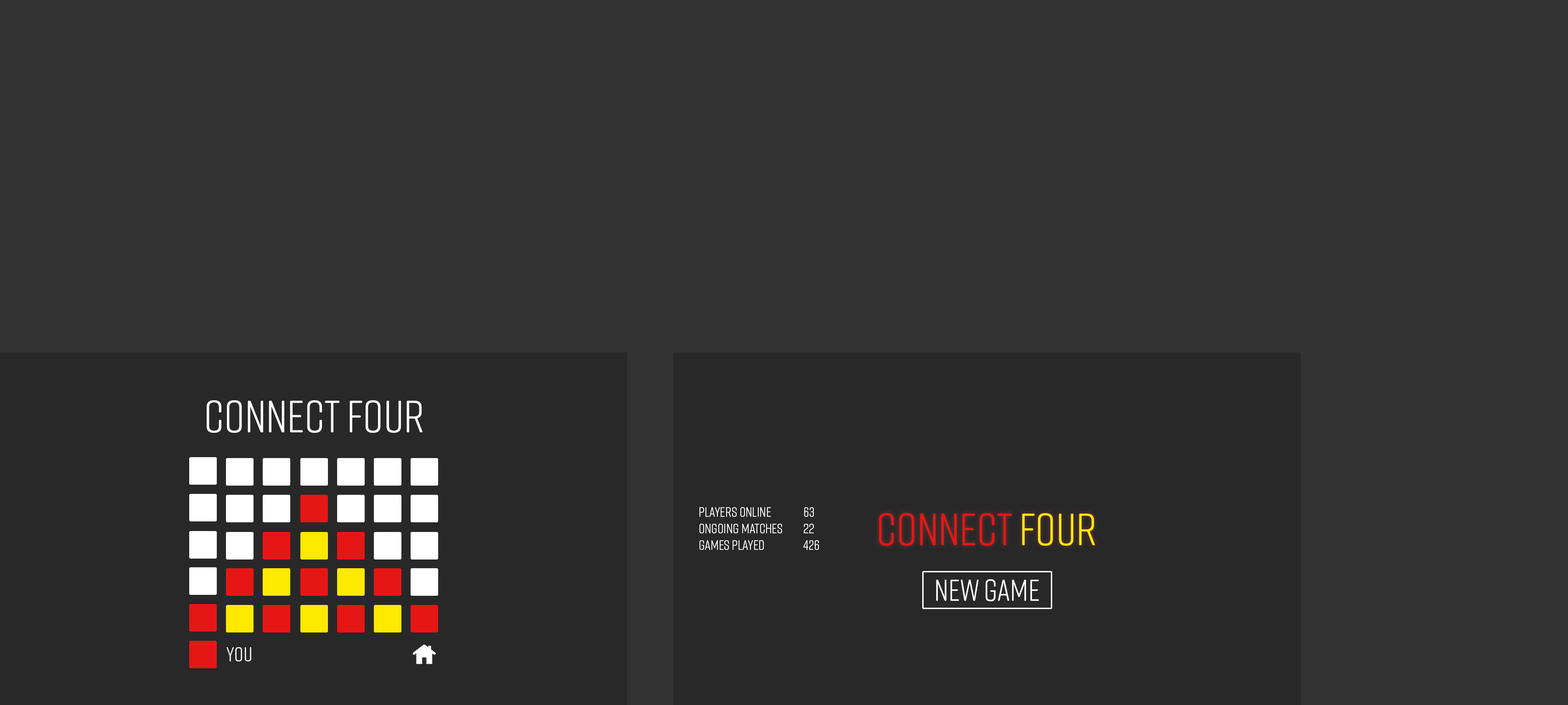
<style>
.page{position:relative;width:1568px;height:705px;background:#333333}
.page>*{position:absolute;margin:0}
.t1{font:45.5px "RiftSoft-Regular";color:#ffffff}
.t2{font:13.8px "RiftSoft-Regular";color:#ffffff}
.t3{font:45.5px "RiftSoft-Regular";color:#e71616}
.t4{font:45.5px "RiftSoft-Regular";color:#fee901}
.t5{font:30.3px "RiftSoft-Regular";color:#ffffff}
.t6{font:20.2px "RiftSoft-Regular";color:#ffffff}
</style>
<div class="page">
<p class="t1" style="left:207px;top:400px;width:216px;height:33px">CONNECT FOUR</p>
<p class="t2" style="left:699px;top:508px;width:83px;height:42px">players online<br>ongoing matches<br>Games played</p>
<p class="t2" style="left:803px;top:508px;width:16px;height:42px">63<br>22<br>426</p>
<p class="t3" style="left:879px;top:513px;width:216px;height:33px">CONNECT <span class="t4">FOUR</span></p>
<p class="t5" style="left:936px;top:580px;width:103px;height:22px">new game</p>
<p class="t6" style="left:226px;top:648px;width:25px;height:14px">you</p>
</div>
